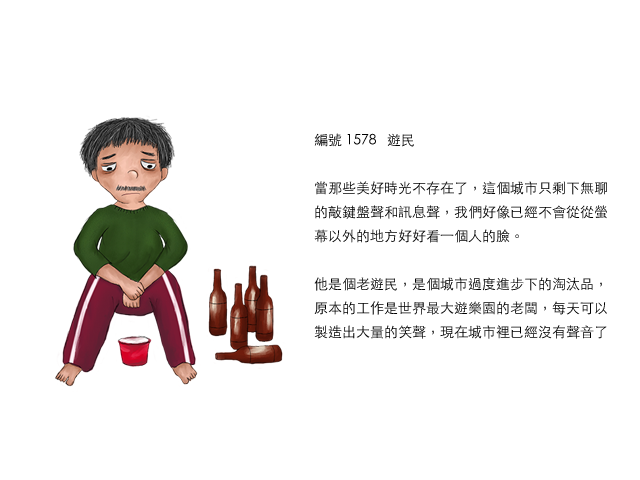
<style>
.page{position:relative;width:640px;height:480px;background:#ffffff}
.page>*{position:absolute;margin:0}
.t1{font:14px/24px "STHeitiTC-Light";color:#000000}
</style>
<div class="page">
<p class="t1" style="left:314px;top:133px;width:293px;height:206px">編號 1578   遊民<br><br>當那些美好時光不存在了，這個城市只剩下無聊的敲鍵盤聲和訊息聲，我們好像已經不會從從螢幕以外的地方好好看一個人的臉。<br><br>他是個老遊民，是個城市過度進步下的淘汰品，原本的工作是世界最大遊樂園的老闆，每天可以製造出大量的笑聲，現在城市裡已經沒有聲音了</p>
</div>
